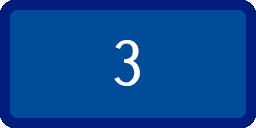
<style>
.page{position:relative;width:256px;height:128px;background:#004c98}
.page>*{position:absolute;margin:0}
.t1{font:70px "Pfennig";color:#ffffff}
</style>
<div class="page">
<p class="t1" style="left:114px;top:40px;width:26px;height:46px">3</p>
</div>
